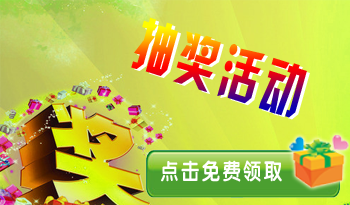
<style>
.page{position:relative;width:350px;height:205px}
.page>*{position:absolute;margin:0}
.t1{font:59px "HYk2gj";letter-spacing:0.1em;scale:0.69 1}
.t2{font:22.5px "FZY4JW--GB1-0";letter-spacing:0.1em;color:#ffffff;scale:0.84 1}
</style>
<div class="page">
<p class="t1" style="left:131px;top:17px;width:176px;height:101px;rotate:18deg">抽奖活动</p>
<p class="t2" style="left:161px;top:160px;width:121px;height:22px">点击免费领取</p>
</div>
